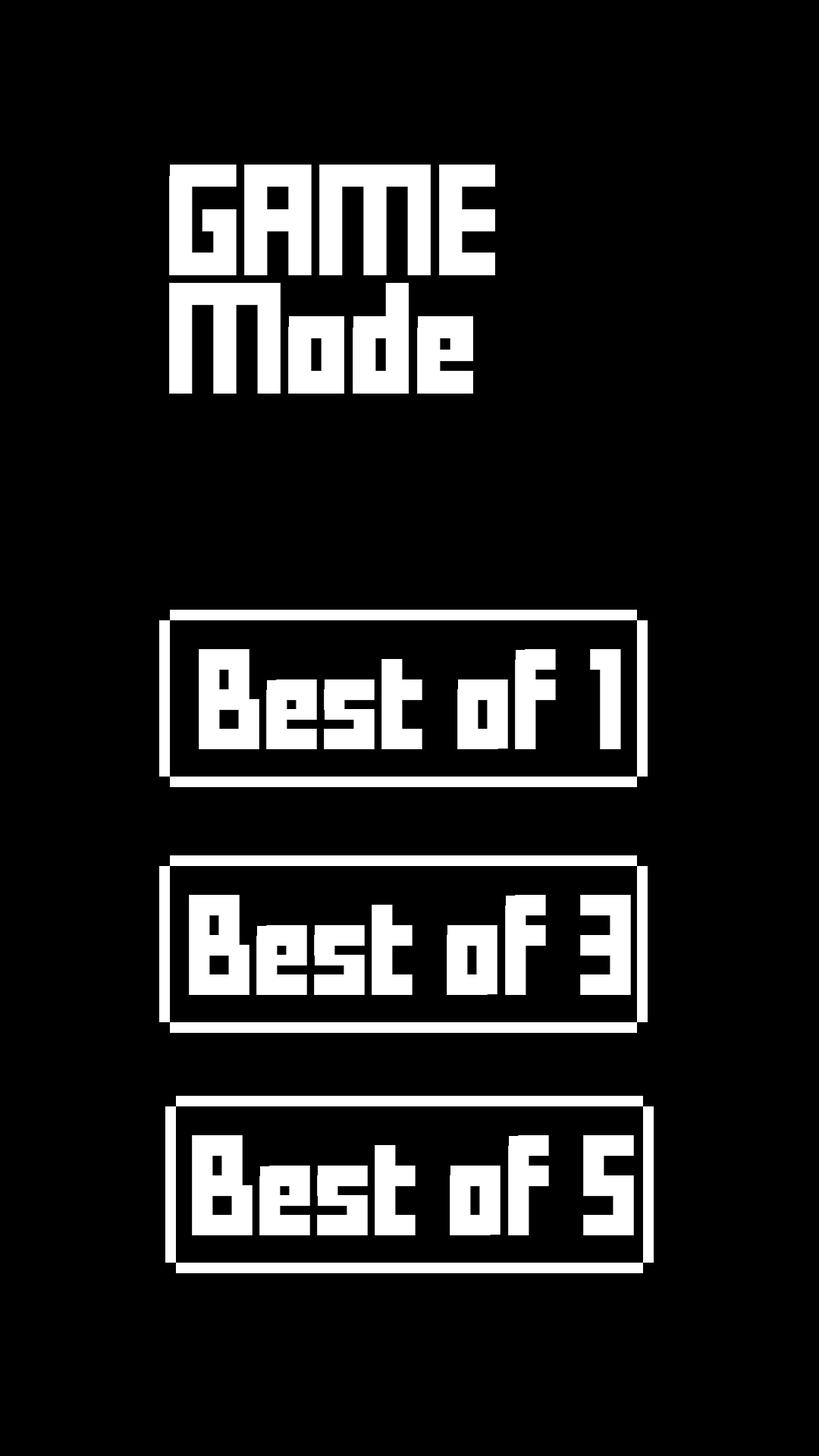
<style>
.page{position:relative;width:819px;height:1456px;background:#000000}
.page>*{position:absolute;margin:0}
.t1{font:151.7px/59.1px "FFFForward";letter-spacing:-0.025em;color:#ffffff}
.t2{font:136.6px "FFFForward";letter-spacing:-0.025em;color:#ffffff}
</style>
<div class="page">
<p class="t1" style="left:169px;top:165px;width:326px;height:229px">GAME<br><br>Mode</p>
<p class="t2" style="left:199px;top:649px;width:422px;height:100px">Best of 1</p>
<p class="t2" style="left:189px;top:895px;width:442px;height:100px">Best of 3</p>
<p class="t2" style="left:192px;top:1135px;width:442px;height:100px">Best of 5</p>
</div>
